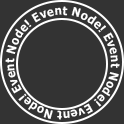
<style>
.page{position:relative;width:124px;height:124px;background:#333333}
.page>*{position:absolute;margin:0}
.t1{font:12px "Verdana-Bold";color:#ffffff;scale:0.89 1}
</style>
<div class="page">
<p class="t1" style="left:5px;top:6px;width:115px;height:114px;text-align:center">Event Node! Event Node! Event Node! Event Node!</p>
</div>
